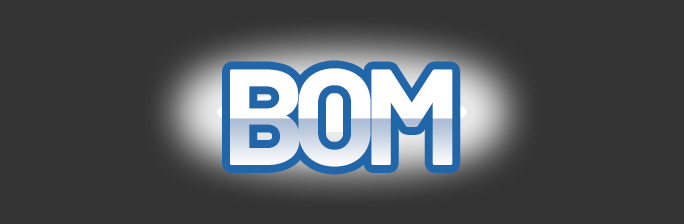
<style>
.page{position:relative;width:684px;height:224px;background:#333333}
.page>*{position:absolute;margin:0}
.t1{font:136px "Barlow-Bold";letter-spacing:-0.1em;color:#ffffff}
</style>
<div class="page">
<p class="t1" style="left:230px;top:68px;width:223px;height:99px">BOM</p>
</div>
